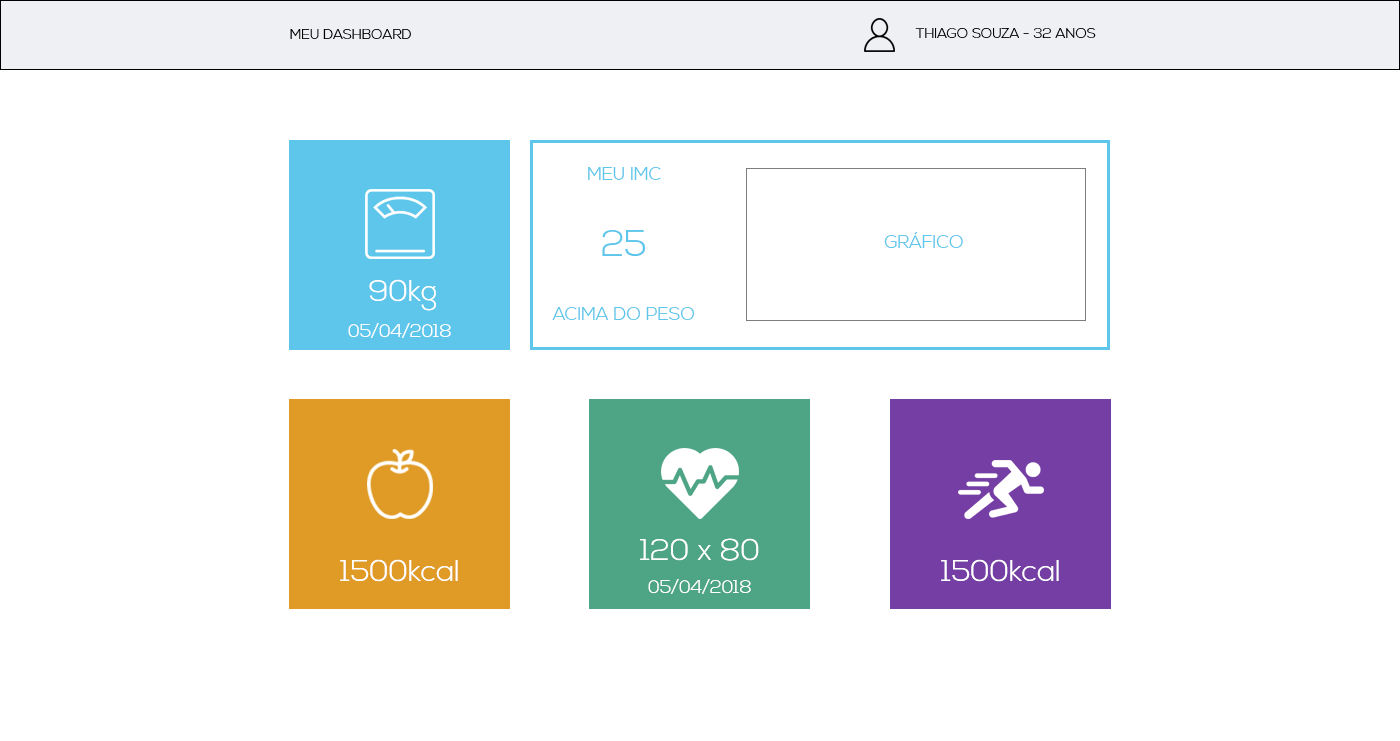
<style>
.page{position:relative;width:1400px;height:741px;background:#ffffff}
.page>*{position:absolute;margin:0}
.t1{font:14px "NexaLight";color:#000000}
.t2{font:18px "NexaLight";color:#5dc6ea}
.t3{font:36px "NexaLight";color:#5dc6ea}
.t4{font:30px "NexaLight";color:#ffffff}
.t5{font:18px "NexaLight";color:#ffffff}
</style>
<div class="page">
<p class="t1" style="left:290px;top:29px;width:121px;height:10px">MEU DASHBOARD</p>
<p class="t1" style="left:915px;top:28px;width:181px;height:10px">THIAGO SOUZA - 32 ANOS</p>
<p class="t2" style="left:588px;top:167px;width:73px;height:13px">MEU IMC</p>
<p class="t3" style="left:602px;top:230px;width:44px;height:26px">25</p>
<p class="t2" style="left:884px;top:232px;width:79px;height:16px">GRÁFICO</p>
<p class="t4" style="left:369px;top:279px;width:67px;height:32px">90kg</p>
<p class="t2" style="left:552px;top:307px;width:142px;height:13px">ACIMA DO PESO</p>
<p class="t5" style="left:348px;top:323px;width:103px;height:15px">05/04/2018</p>
<p class="t4" style="left:640px;top:538px;width:119px;height:23px">120 x 80</p>
<p class="t4" style="left:340px;top:559px;width:118px;height:23px">1500kcal</p>
<p class="t4" style="left:941px;top:559px;width:118px;height:23px">1500kcal</p>
<p class="t5" style="left:648px;top:579px;width:103px;height:15px">05/04/2018</p>
</div>
